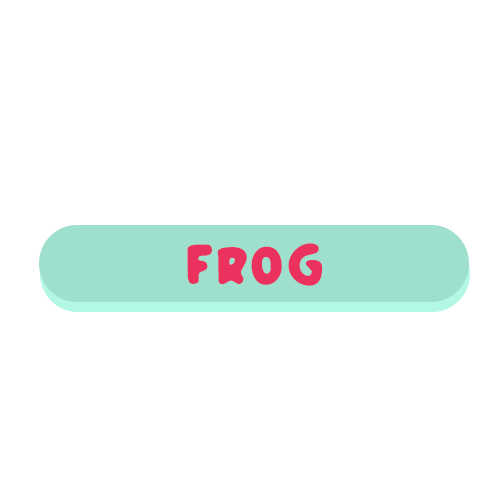
<style>
.page{position:relative;width:500px;height:500px;background:#ffffff}
.page>*{position:absolute;margin:0}
.t1{font:62.1px "BomberBalloon";letter-spacing:0.08em;color:#eb325f}
</style>
<div class="page">
<p class="t1" style="left:187px;top:243px;width:135px;height:43px">frog</p>
</div>
